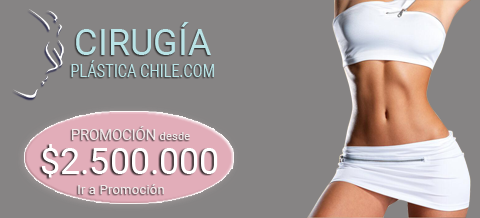
<style>
.page{position:relative;width:480px;height:218px;background:#868484}
.page>*{position:absolute;margin:0}
.t1{font:18px "Roboto-Regular";color:#b9e3e6;scale:0.8 1}
.t2{font:36px "Roboto-Regular";color:#b9e3e6}
.t3{font:14.6px "Roboto-Regular";color:#f0eaea}
.t4{font:11.4px "Roboto-Regular";color:#f0eaea}
.t5{font:35.8px "Roboto-Regular";color:#ffffff}
.t6{font:13.5px "Roboto-Regular";color:#f0eaea}
</style>
<div class="page">
<p class="t1" style="left:71px;top:22px;width:143px;height:55px;text-align:center"><span class="t2">CIRUGÍA<br></span>PLÁSTICA CHILE.COM</p>
<p class="t3" style="left:71px;top:126px;width:119px;height:14px">PROMOCIÓN <span class="t4">desde</span></p>
<p class="t5" style="left:41px;top:144px;width:177px;height:34px">$2.500.000</p>
<p class="t6" style="left:78px;top:184px;width:86px;height:10px">Ir a Promoción</p>
</div>
